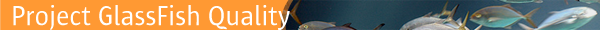
<style>
.page{position:relative;width:600px;height:30px;background:#ff9933}
.page>*{position:absolute;margin:0}
.t1{font:28px "SunSans";color:#ffffff}
</style>
<div class="page">
<p class="t1" style="left:13px;top:5px;width:277px;height:25px">Project GlassFish Quality</p>
</div>
